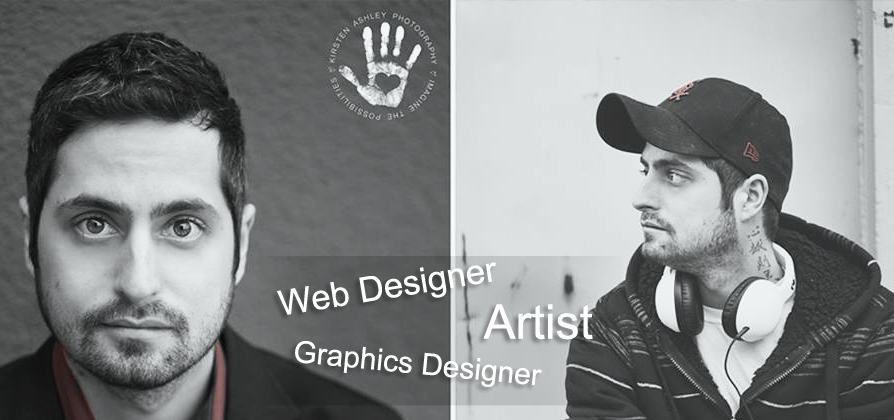
<style>
.page{position:relative;width:894px;height:420px}
.page>*{position:absolute;margin:0}
.t1{font:34.8px "ArialMT";color:#ffffff}
.t2{font:48px "ArialMT";color:#ffffff}
.t3{font:30px "ArialMT";color:#ffffff}
</style>
<div class="page">
<p class="t1" style="left:277px;top:262px;width:219px;height:53px;rotate:-9deg">Web Designer</p>
<p class="t2" style="left:483px;top:304px;width:110px;height:36px">Artist</p>
<p class="t3" style="left:295px;top:341px;width:247px;height:46px;rotate:6deg">Graphics Designer</p>
</div>
